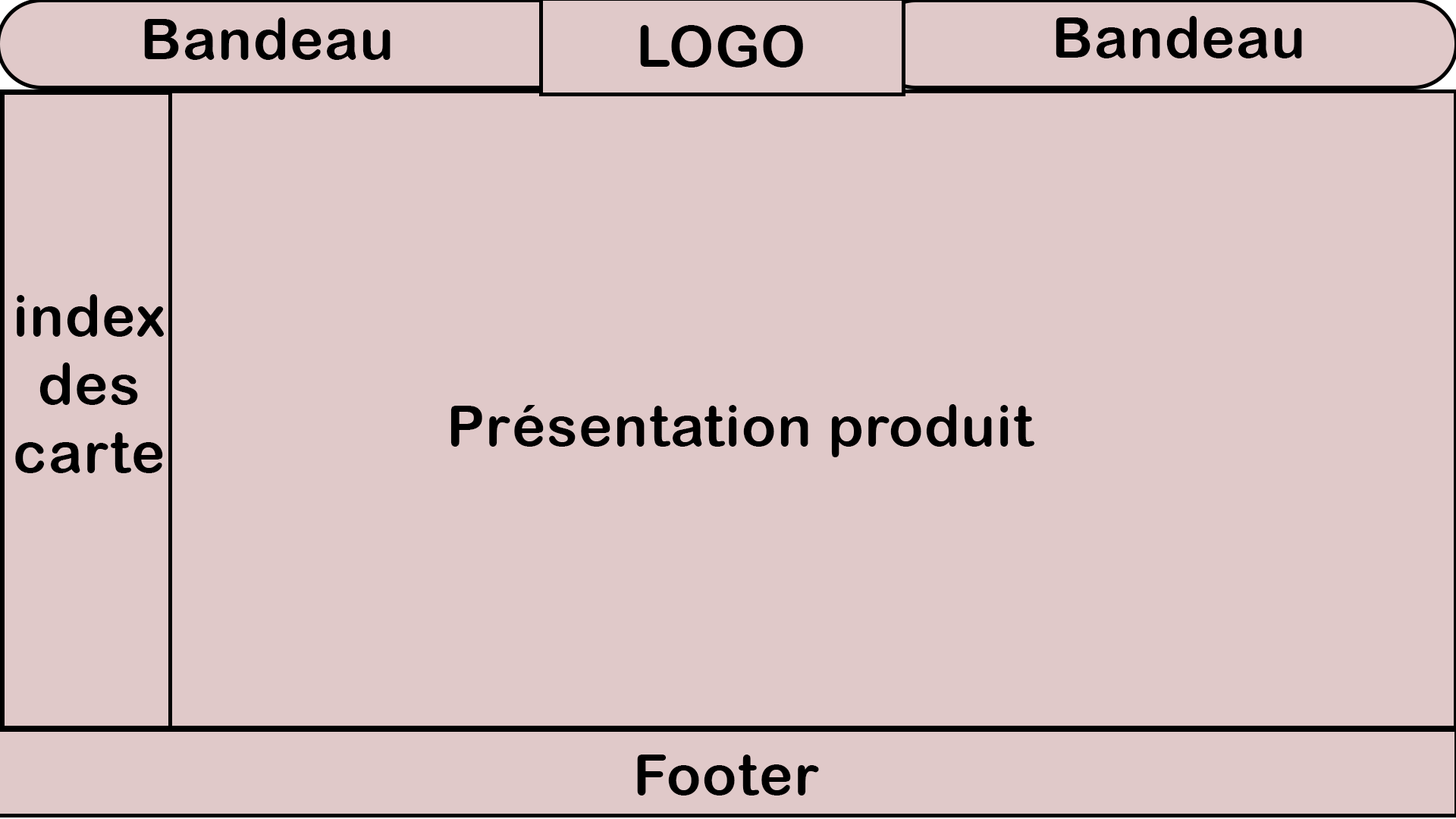
<style>
.page{position:relative;width:1456px;height:819px;background:#e0c9c9}
.page>*{position:absolute;margin:0}
.t1{font:56.9px "ArialRoundedMTBold";letter-spacing:0.02em;color:#000000}
</style>
<div class="page">
<p class="t1" style="left:144px;top:17px;width:247px;height:43px">Bandeau</p>
<p class="t1" style="left:1056px;top:16px;width:246px;height:42px">Bandeau</p>
<p class="t1" style="left:640px;top:25px;width:163px;height:42px">LOGO</p>
<p class="t1" style="left:15px;top:294px;width:149px;height:179px;text-align:center">index<br>des<br>carte</p>
<p class="t1" style="left:450px;top:404px;width:584px;height:53px">Présentation produit</p>
<p class="t1" style="left:637px;top:755px;width:182px;height:40px">Footer</p>
</div>
